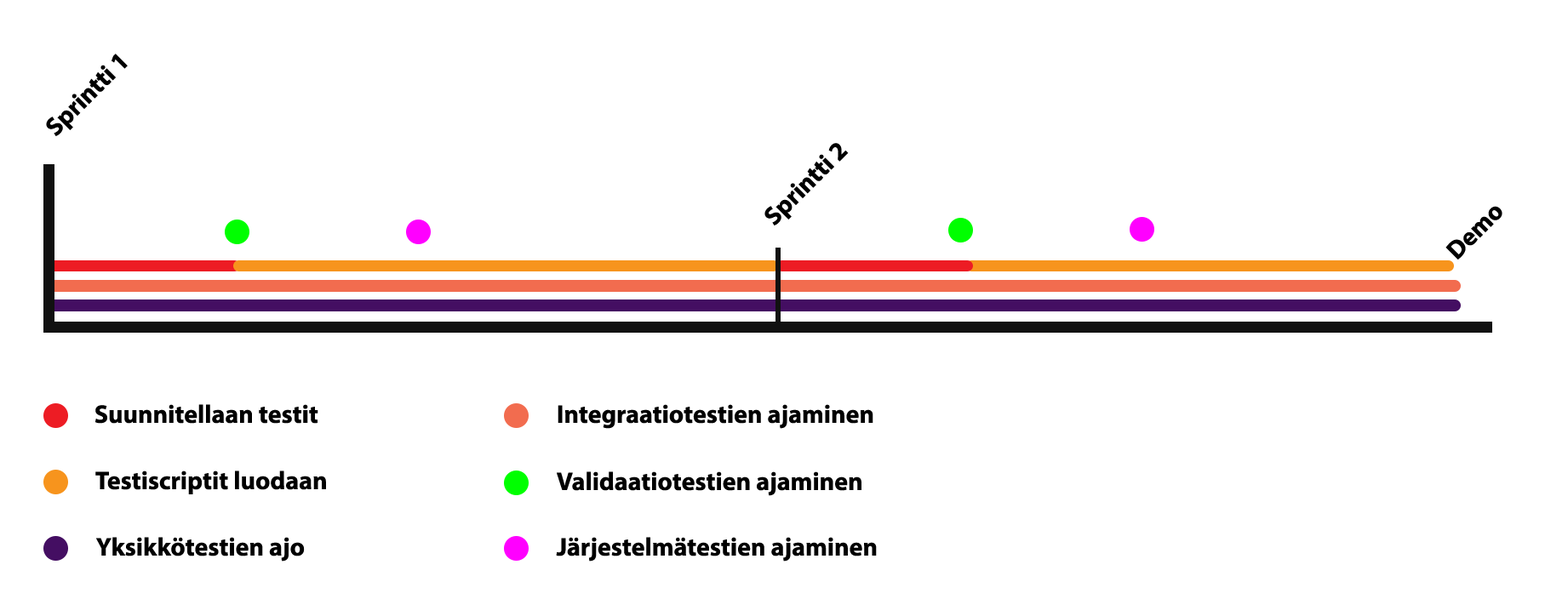
<style>
.page{position:relative;width:1568px;height:616px;background:#ffffff}
.page>*{position:absolute;margin:0}
.t1{font:25.5px "MyriadPro-Bold";color:#000000}
</style>
<div class="page">
<p class="t1" style="left:46px;top:54px;width:82px;height:82px;rotate:-45deg">Sprintti 1</p>
<p class="t1" style="left:764px;top:143px;width:85px;height:83px;rotate:-45deg">Sprintti 2</p>
<p class="t1" style="left:1445px;top:206px;width:57px;height:54px;rotate:-45deg">Demo</p>
<p class="t1" style="left:95px;top:404px;width:223px;height:20px">Suunnitellaan testit</p>
<p class="t1" style="left:558px;top:404px;width:315px;height:25px">Integraatiotestien ajaminen</p>
<p class="t1" style="left:95px;top:471px;width:231px;height:24px">Testiscriptit luodaan</p>
<p class="t1" style="left:557px;top:472px;width:304px;height:24px">Validaatiotestien ajaminen</p>
<p class="t1" style="left:96px;top:537px;width:209px;height:25px">Yksikkötestien ajo</p>
<p class="t1" style="left:556px;top:537px;width:321px;height:25px">Järjestelmätestien ajaminen</p>
</div>
